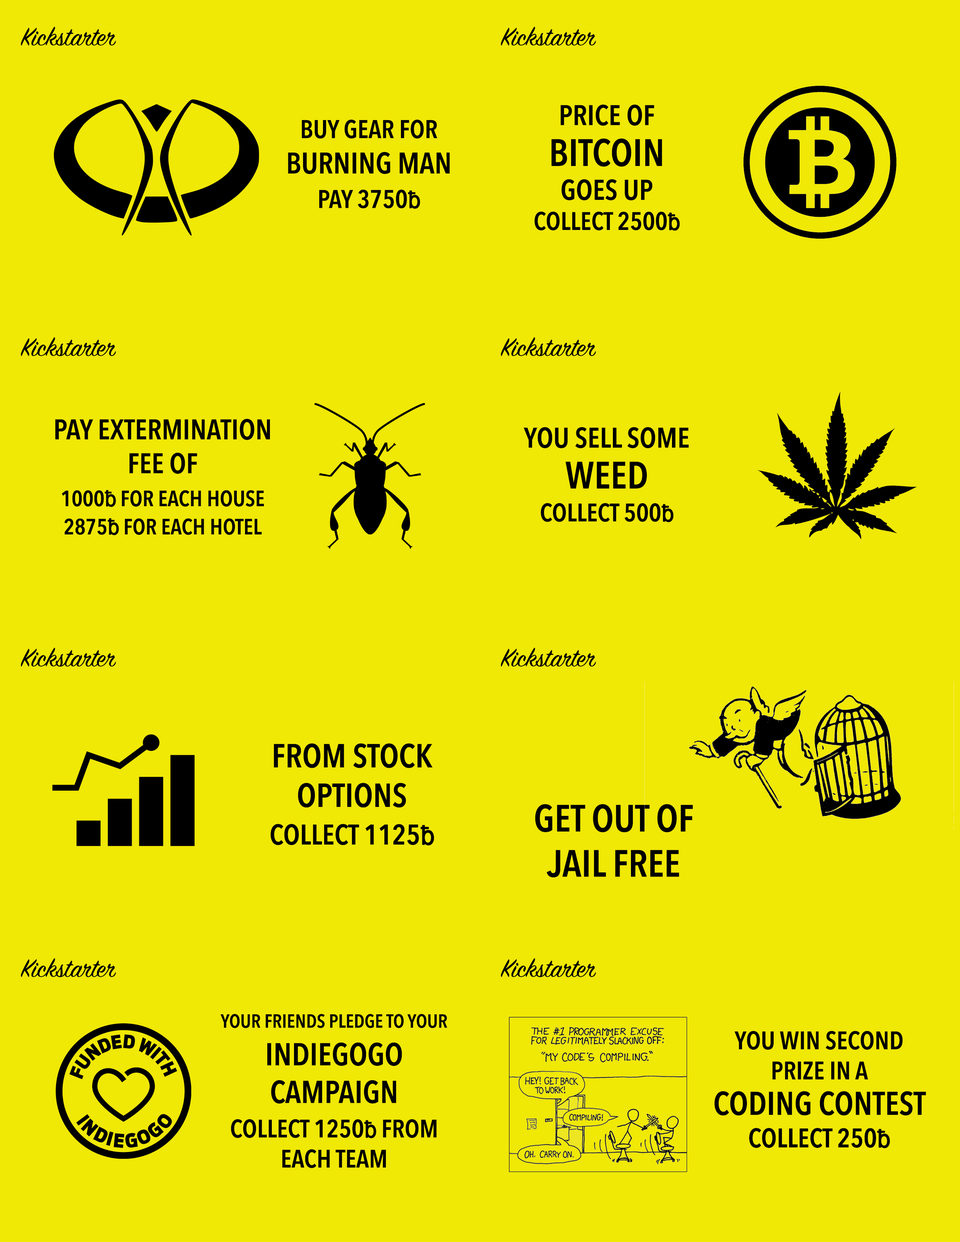
<style>
.page{position:relative;width:960px;height:1242px;background:#f0e805}
.page>*{position:absolute;margin:0}
.t1{font:28.2px "SignPainter-HouseScript";color:#000000}
.t2{font:25.1px "AvenirNextCondensed-DemiBold";color:#000000;text-transform:uppercase}
.t3{font:28.2px/40.8px "AvenirNextCondensed-DemiBold";color:#000000;text-transform:uppercase}
.t4{font:37.6px/40.8px "AvenirNextCondensed-DemiBold";color:#000000;text-transform:uppercase}
.t5{font:28.2px "AvenirNextCondensed-DemiBold";color:#000000;text-transform:uppercase}
.t6{font:23.5px "Helvetica";color:#000000;text-transform:uppercase;font-weight:bold;scale:0.9 1}
.t7{font:25.3px "AvenirNextCondensed-DemiBold";color:#000000;text-transform:uppercase}
.t8{font:29.5px "AvenirNextCondensed-DemiBold";color:#000000;text-transform:uppercase}
.t9{font:25.3px/34.5px "AvenirNextCondensed-DemiBold";color:#000000;text-transform:uppercase}
.t10{font:23.9px/34.5px "Helvetica";color:#000000;text-transform:uppercase;font-weight:bold;scale:0.9 1}
.t11{font:22px/32.9px "AvenirNextCondensed-DemiBold";color:#000000;text-transform:uppercase}
.t12{font:22px "Helvetica";color:#000000;text-transform:uppercase;font-weight:bold;scale:0.9 1}
.t13{font:22px/28.2px "AvenirNextCondensed-DemiBold";color:#000000;text-transform:uppercase}
.t14{font:25.1px/32.9px "AvenirNextCondensed-DemiBold";color:#000000;text-transform:uppercase}
.t15{font:23.5px/32.9px "Helvetica";color:#000000;text-transform:uppercase;font-weight:bold;scale:0.9 1}
.t16{font:32.9px "AvenirNextCondensed-DemiBold";color:#000000;text-transform:uppercase}
.t17{font:28.2px/37.6px "AvenirNextCondensed-DemiBold";color:#000000;text-transform:uppercase}
.t18{font:26.7px/37.6px "Helvetica";color:#000000;text-transform:uppercase;font-weight:bold;scale:0.9 1}
.t19{font:37.6px "AvenirNextCondensed-DemiBold";color:#000000;text-transform:uppercase}
.t20{font:18.8px "AvenirNextCondensed-DemiBold";color:#000000;text-transform:uppercase}
.t21{font:31.4px "AvenirNextCondensed-DemiBold";color:#000000;text-transform:uppercase}
.t22{font:25.1px/34.5px "AvenirNextCondensed-DemiBold";color:#000000;text-transform:uppercase}
.t23{font:23.5px/34.5px "Helvetica";color:#000000;text-transform:uppercase;font-weight:bold;scale:0.9 1}
.t24{font:32.5px/35.5px "AvenirNextCondensed-DemiBold";color:#000000;text-transform:uppercase}
.t25{font:26.6px "AvenirNextCondensed-DemiBold";color:#000000;text-transform:uppercase}
.t26{font:25.1px/32.5px "Helvetica";color:#000000;text-transform:uppercase;font-weight:bold;scale:0.9 1}
</style>
<div class="page">
<p class="t1" style="left:21px;top:26px;width:95px;height:20px">Kickstarter</p>
<p class="t1" style="left:501px;top:26px;width:95px;height:20px">Kickstarter</p>
<p class="t2" style="left:535px;top:104px;width:145px;height:127px;text-align:center"><span class="t3">price of<br></span><span class="t4">bitcoin <br></span><span class="t5">goes up<br></span>collect 2500<span class="t6">ƀ</span></p>
<p class="t7" style="left:288px;top:119px;width:162px;height:90px;text-align:center">Buy GEAR FOR <span class="t8">Burning Man </span><span class="t9">pay 3750</span><span class="t10">ƀ</span></p>
<p class="t1" style="left:21px;top:337px;width:95px;height:19px">Kickstarter</p>
<p class="t1" style="left:501px;top:337px;width:95px;height:19px">Kickstarter</p>
<p class="t5" style="left:55px;top:419px;width:215px;height:116px;text-align:center">Pay extermination<br>fee of <br><span class="t11">1000</span><span class="t12">ƀ</span><span class="t11"> for each house<br></span><span class="t13">2875</span><span class="t12">ƀ</span><span class="t13"> for each hotel</span></p>
<p class="t3" style="left:524px;top:427px;width:165px;height:95px;text-align:center">you sell some<br><span class="t4">weed<br></span><span class="t14">collect 500</span><span class="t15">ƀ</span></p>
<p class="t1" style="left:21px;top:647px;width:95px;height:20px">Kickstarter</p>
<p class="t1" style="left:501px;top:647px;width:95px;height:20px">Kickstarter</p>
<p class="t16" style="left:271px;top:743px;width:163px;height:103px;text-align:center">From stock options<br><span class="t17">collect 1125</span><span class="t18">ƀ</span></p>
<p class="t19" style="left:535px;top:804px;width:158px;height:74px;text-align:center">Get out of jail free</p>
<p class="t1" style="left:21px;top:958px;width:95px;height:20px">Kickstarter</p>
<p class="t1" style="left:501px;top:958px;width:95px;height:20px">Kickstarter</p>
<p class="t20" style="left:221px;top:1014px;width:226px;height:154px;text-align:center">Your friends pledge to your<br><span class="t21">Indiegogo<br>campaign<br></span><span class="t22">collect 1250</span><span class="t23">ƀ </span><span class="t22">from<br></span><span class="t2">each team</span></p>
<p class="t2" style="left:714px;top:1031px;width:212px;height:118px;text-align:center">You win second<br>prize in a<br><span class="t24">coding contest<br></span><span class="t25">collect 250</span><span class="t26">ƀ</span></p>
</div>
